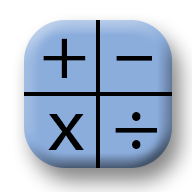
<style>
.page{position:relative;width:192px;height:192px;background:#8baddc}
.page>*{position:absolute;margin:0}
.t1{font:73.6px "MyriadPro-Regular";color:#000000;scale:1.09 1}
.t2{font:73.6px "MyriadPro-Regular";color:#000000;scale:1.95 1}
.t3{font:81px "MyriadPro-Regular";color:#000000}
</style>
<div class="page">
<p class="t1" style="left:43px;top:38px;width:43px;height:40px">+</p>
<p class="t2" style="left:116px;top:56px;width:36px;height:5px">-</p>
<p class="t3" style="left:115px;top:112px;width:42px;height:37px">÷</p>
<p class="t1" style="left:48px;top:114px;width:36px;height:36px">x</p>
</div>
